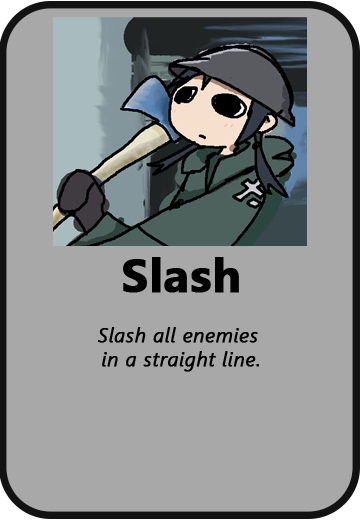
<style>
.page{position:relative;width:360px;height:520px;background:#a8a8a8}
.page>*{position:absolute;margin:0}
.t1{font:47px "SegoeUI-Bold";color:#000000;font-weight:bold}
.t2{font:20px "SegoeUI-SemilightItalic";color:#000000;font-weight:bold}
</style>
<div class="page">
<p class="t1" style="left:123px;top:257px;width:116px;height:36px">Slash</p>
<p class="t2" style="left:98px;top:327px;width:161px;height:45px;text-align:center">Slash all enemies <br>in a straight line.</p>
</div>
